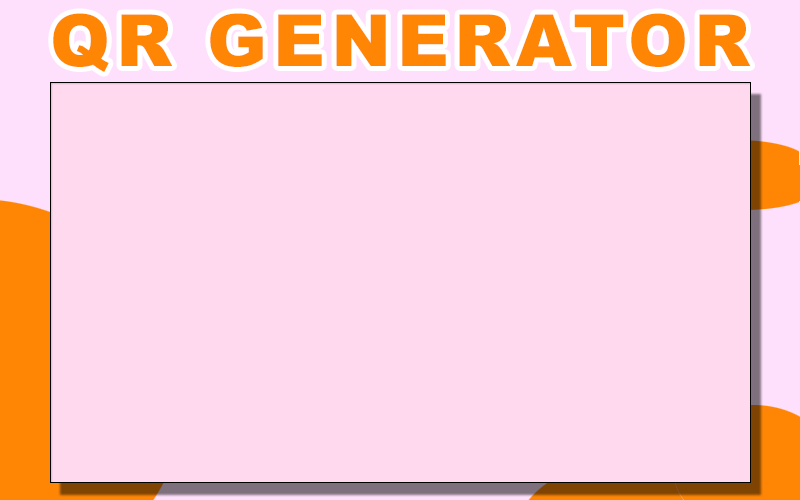
<style>
.page{position:relative;width:800px;height:500px;background:#ffdaef}
.page>*{position:absolute;margin:0}
.t1{font:72px "Arial-Black";letter-spacing:0.08em;color:#ff8605}
</style>
<div class="page">
<p class="t1" style="left:53px;top:13px;width:698px;height:59px">QR GENERATOR</p>
</div>
